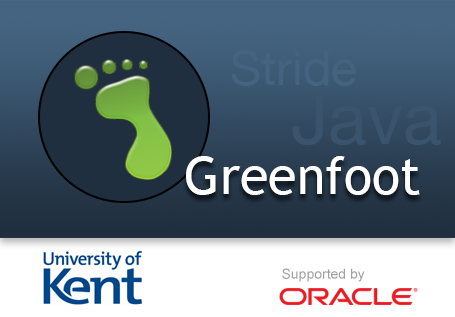
<style>
.page{position:relative;width:455px;height:317px}
.page>*{position:absolute;margin:0}
.t1{font:48px "HelveticaNeue";color:#446381}
.t2{font:72px "HelveticaNeue";color:#3a546e}
.t3{font:52px "TrebuchetMS";color:#ffffff}
.t4{font:14px "ArialMT";color:#a2a0a0}
</style>
<div class="page">
<p class="t1" style="left:231px;top:50px;width:125px;height:36px">Stride</p>
<p class="t2" style="left:292px;top:93px;width:149px;height:52px">Java</p>
<p class="t3" style="left:186px;top:156px;width:234px;height:39px">Greenfoot</p>
<p class="t4" style="left:282px;top:268px;width:83px;height:14px">Supported by</p>
</div>
